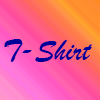
<style>
.page{position:relative;width:100px;height:100px}
.page>*{position:absolute;margin:0}
.t1{font:31.9px "BrushScriptMT";color:#000099;scale:0.96 1}
</style>
<div class="page">
<p class="t1" style="left:4px;top:39px;width:88px;height:23px">T-Shirt</p>
</div>
